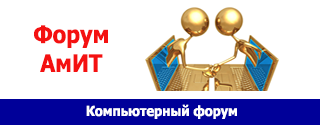
<style>
.page{position:relative;width:320px;height:125px;background:#ffffff}
.page>*{position:absolute;margin:0}
.t1{font:24px "Tahoma-Bold";color:#f41111;scale:0.91 1}
.t2{font:14px "Tahoma-Bold";color:#ffffff;scale:0.91 1}
</style>
<div class="page">
<p class="t1" style="left:34px;top:25px;width:74px;height:47px;text-align:center">Форум<br>АмИТ</p>
<p class="t2" style="left:86px;top:104px;width:151px;height:15px">Компьютерный форум</p>
</div>
